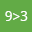
<style>
.page{position:relative;width:32px;height:32px;background:#62ab46}
.page>*{position:absolute;margin:0}
.t1{font:14px "AllegrettoScriptTwo";color:#ffffff}
</style>
<div class="page">
<p class="t1" style="left:5px;top:11px;width:23px;height:10px">9&gt;3</p>
</div>
